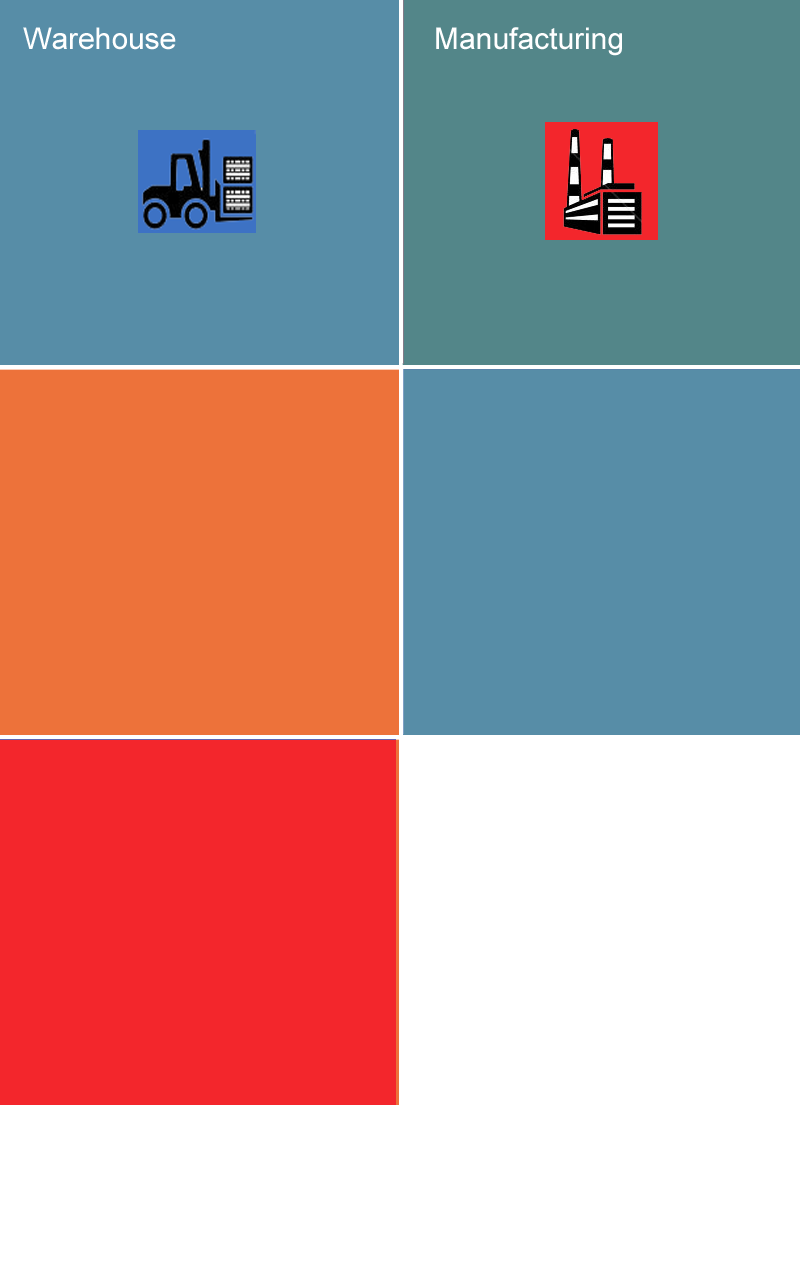
<style>
.page{position:relative;width:800px;height:1280px;background:#ffffff}
.page>*{position:absolute;margin:0}
.t1{font:30px "ArialMT";color:#ffffff}
</style>
<div class="page">
<p class="t1" style="left:23px;top:27px;width:153px;height:23px">Warehouse</p>
<p class="t1" style="left:436px;top:27px;width:186px;height:29px">Manufacturing</p>
</div>
